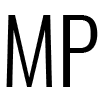
<style>
.page{position:relative;width:100px;height:100px;background:#ffffff}
.page>*{position:absolute;margin:0}
.t1{font:87.5px "Oswald-Light";color:#000000}
</style>
<div class="page">
<p class="t1" style="left:6px;top:15px;width:92px;height:72px">MP</p>
</div>
